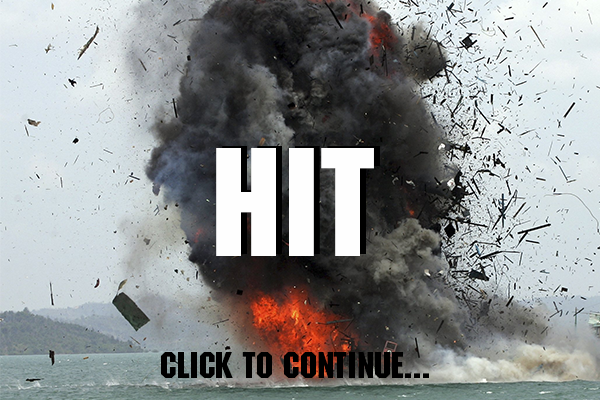
<style>
.page{position:relative;width:600px;height:400px}
.page>*{position:absolute;margin:0}
.t1{font:150px "MachineStd";color:#fefefe}
.t2{font:36px "MachineStd";color:#000000}
</style>
<div class="page">
<p class="t1" style="left:216px;top:148px;width:158px;height:108px">hit</p>
<p class="t2" style="left:161px;top:352px;width:268px;height:26px">Click to continue...</p>
</div>
